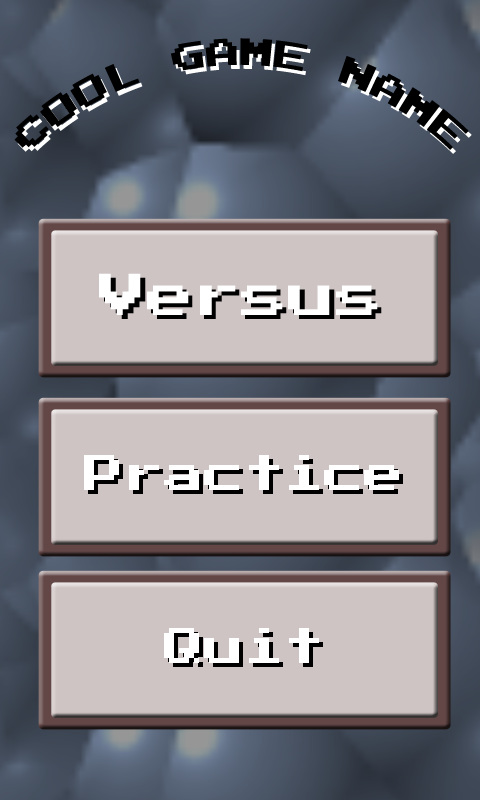
<style>
.page{position:relative;width:480px;height:800px;background:#cfc4c4}
.page>*{position:absolute;margin:0}
.t1{font:30px "PressStart2P";color:#000000}
.t2{font:47.2px "PressStart2P";color:#ffffff}
.t3{font:47.2px "PressStart2P"}
.t4{font:40px "PressStart2P";color:#ffffff}
.t5{font:40px "PressStart2P"}
</style>
<div class="page">
<p class="t1" style="left:14px;top:38px;width:455px;height:112px;text-align:center">COOL GAME NAME</p>
<p class="t2" style="left:99px;top:273px;width:279px;height:42px">Versus</p>
<p class="t3" style="left:104px;top:277px;width:278px;height:42px">Versus</p>
<p class="t4" style="left:84px;top:455px;width:315px;height:35px">Practice</p>
<p class="t5" style="left:88px;top:459px;width:315px;height:35px">Practice</p>
<p class="t4" style="left:164px;top:628px;width:155px;height:35px">Quit</p>
<p class="t5" style="left:168px;top:632px;width:155px;height:35px">Quit</p>
</div>
